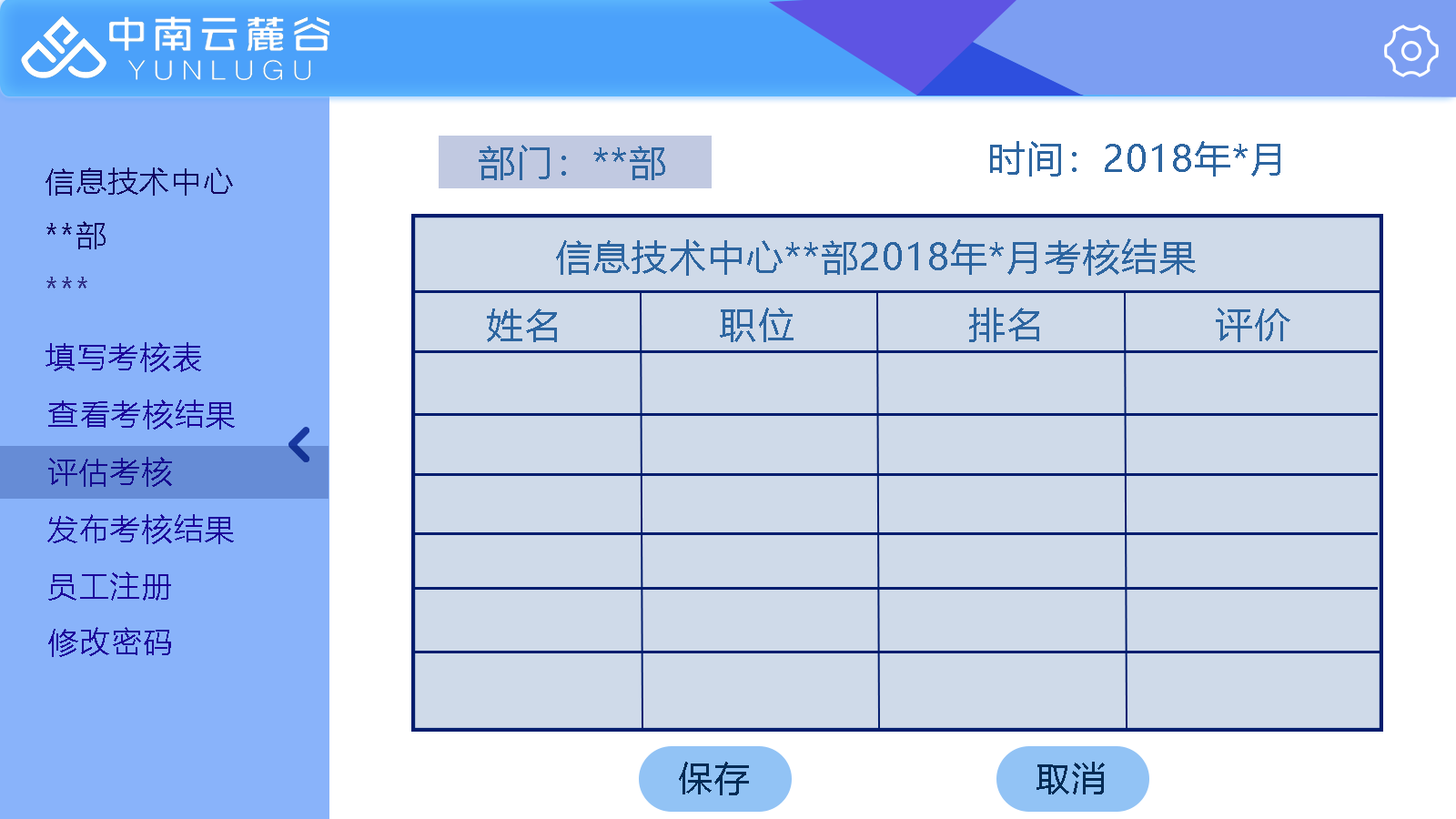
<style>
.page{position:relative;width:1456px;height:819px;background:#cfdae9}
.page>*{position:absolute;margin:0}
.t1{font:36px "MicrosoftYaHei";letter-spacing:0.05em;color:#2d65a0}
.t2{font:30.3px "MicrosoftYaHei";letter-spacing:0.05em;color:#130461}
.t3{font:30.3px "MicrosoftYaHei";letter-spacing:0.05em;color:#303087}
.t4{font:30.3px "MicrosoftYaHei";letter-spacing:0.05em;color:#1c039a}
.t5{font:34.1px "MicrosoftYaHeiUI";letter-spacing:0.05em;color:#032b55}
</style>
<div class="page">
<p class="t1" style="left:479px;top:145px;width:186px;height:35px">部门：**部</p>
<p class="t1" style="left:990px;top:141px;width:290px;height:36px">时间：2018年*月</p>
<p class="t2" style="left:45px;top:167px;width:188px;height:29px">信息技术中心</p>
<p class="t2" style="left:46px;top:221px;width:60px;height:28px">**部</p>
<p class="t1" style="left:556px;top:238px;width:640px;height:38px">信息技术中心**部2018年*月考核结果</p>
<p class="t3" style="left:46px;top:277px;width:41px;height:11px">***</p>
<p class="t1" style="left:487px;top:308px;width:70px;height:34px">姓名</p>
<p class="t1" style="left:720px;top:308px;width:74px;height:34px">职位</p>
<p class="t1" style="left:969px;top:308px;width:70px;height:34px">排名</p>
<p class="t1" style="left:1216px;top:308px;width:74px;height:34px">评价</p>
<p class="t4" style="left:45px;top:342px;width:156px;height:30px">填写考核表</p>
<p class="t4" style="left:48px;top:399px;width:187px;height:31px">查看考核结果</p>
<p class="t4" style="left:48px;top:457px;width:124px;height:30px">评估考核</p>
<p class="t4" style="left:47px;top:514px;width:187px;height:30px">发布考核结果</p>
<p class="t4" style="left:48px;top:571px;width:123px;height:30px">员工注册</p>
<p class="t4" style="left:48px;top:627px;width:123px;height:30px">修改密码</p>
<p class="t5" style="left:679px;top:762px;width:70px;height:33px">保存</p>
<p class="t5" style="left:1036px;top:762px;width:69px;height:32px">取消</p>
</div>
